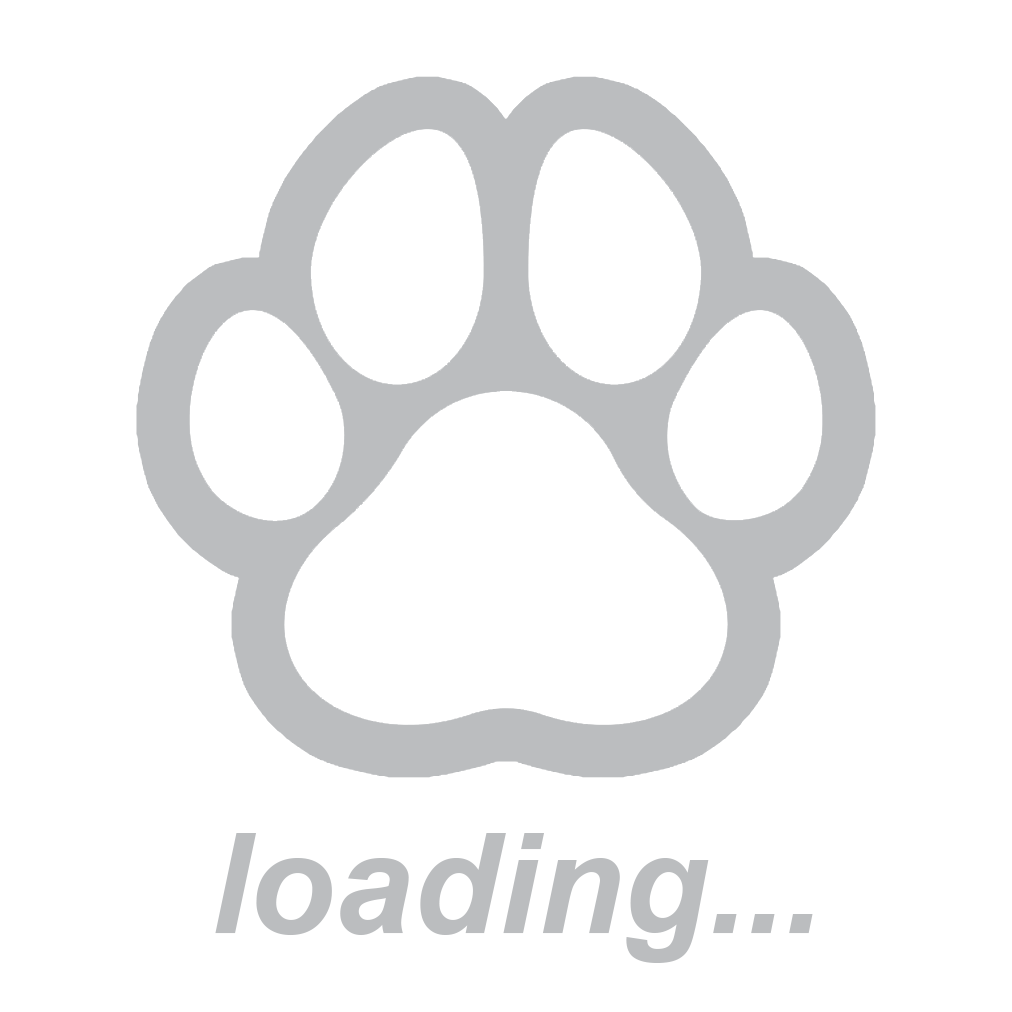
<style>
.page{position:relative;width:1012px;height:1012px;background:#ffffff}
.page>*{position:absolute;margin:0}
.t1{font:140px "Arial-BoldItalicMT";letter-spacing:0.02em;color:#c8c8c8}
</style>
<div class="page">
<p class="t1" style="left:215px;top:833px;width:598px;height:130px">loading...</p>
</div>
